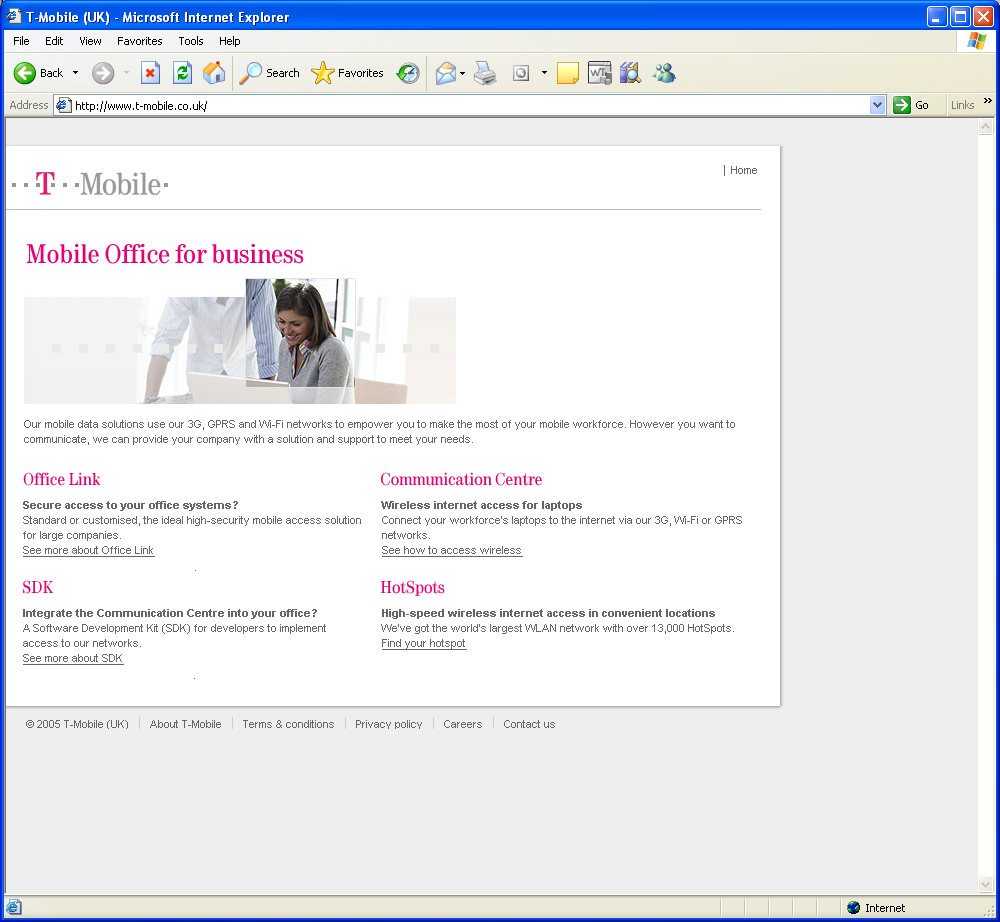
<style>
.page{position:relative;width:1000px;height:922px;background:#ffffff}
.page>*{position:absolute;margin:0}
.t1{font:28px "Tele-Antiqua";color:#e20074}
.t2{font:11px/14.9px "ArialMT";color:#666666}
.t3{font:18px "Tele-Antiqua";color:#e20074}
.t4{font:11px/14.9px "Arial-BoldMT";color:#666666}
.t5{font:11px/14.9px "ArialMT";color:#666666;text-decoration:underline}
</style>
<div class="page">
<p class="t1" style="left:26px;top:244px;width:278px;height:20px">Mobile Office for business</p>
<p class="t2" style="left:24px;top:420px;width:711px;height:25px">Our mobile data solutions use our 3G, GPRS and Wi-Fi networks to empower you to make the most of your mobile workforce. However you want to communicate, we can provide your company with a solution and support to meet your needs.</p>
<p class="t3" style="left:23px;top:472px;width:78px;height:14px">Office Link</p>
<p class="t3" style="left:381px;top:472px;width:161px;height:14px">Communication Centre</p>
<p class="t2" style="left:23px;top:501px;width:338px;height:70px"><span class="t4">Secure access to your office systems<br></span>Standard or customised, the ideal high-security mobile access solution for large companies. <br><span class="t5">See more about Office Link</span></p>
<p class="t2" style="left:381px;top:501px;width:361px;height:56px"><span class="t4">Wireless internet access for laptops<br></span>Connect your workforce’s laptops to the internet via our 3G, Wi-Fi or GPRS networks. <br><span class="t5">See how to access wireless</span></p>
<p class="t3" style="left:23px;top:580px;width:31px;height:14px">SDK</p>
<p class="t3" style="left:380px;top:580px;width:65px;height:16px">HotSpots</p>
<p class="t2" style="left:23px;top:609px;width:303px;height:70px"><span class="t4">Integrate the Communication Centre into your office<br></span>A Software Development Kit (SDK) for developers to implement access to our networks. <br><span class="t5">See more about SDK</span></p>
<p class="t2" style="left:381px;top:609px;width:353px;height:41px"><span class="t4">High-speed wireless internet access in convenient locations<br></span>We’ve got the world's largest WLAN network with over 13,000 HotSpots.<br><span class="t5">Find your hotspot</span></p>
</div>
